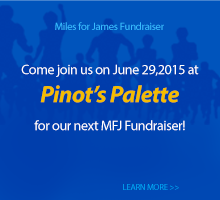
<style>
.page{position:relative;width:220px;height:200px}
.page>*{position:absolute;margin:0}
.t1{font:10.6px "MyriadPro-Regular";letter-spacing:-0.025em;color:#38bcff}
.t2{font:14px/19px "MyriadPro-Regular";letter-spacing:-0.025em;color:#ffffff}
.t3{font:24px/19px "MyriadPro-BoldIt";letter-spacing:-0.025em;color:#f4bc00}
.t4{font:8.6px "MyriadPro-Regular";letter-spacing:-0.025em;color:#00aaf7}
</style>
<div class="page">
<p class="t1" style="left:55px;top:22px;width:109px;height:8px">Miles for James Fundraiser</p>
<p class="t2" style="left:21px;top:64px;width:178px;height:67px;text-align:center">Come join us on June 29,2015 at <br><span class="t3">Pinot’s Palette <br></span>for our next MFJ Fundraiser!</p>
<p class="t4" style="left:123px;top:184px;width:56px;height:6px">LEARN MORE &gt;&gt;</p>
</div>
